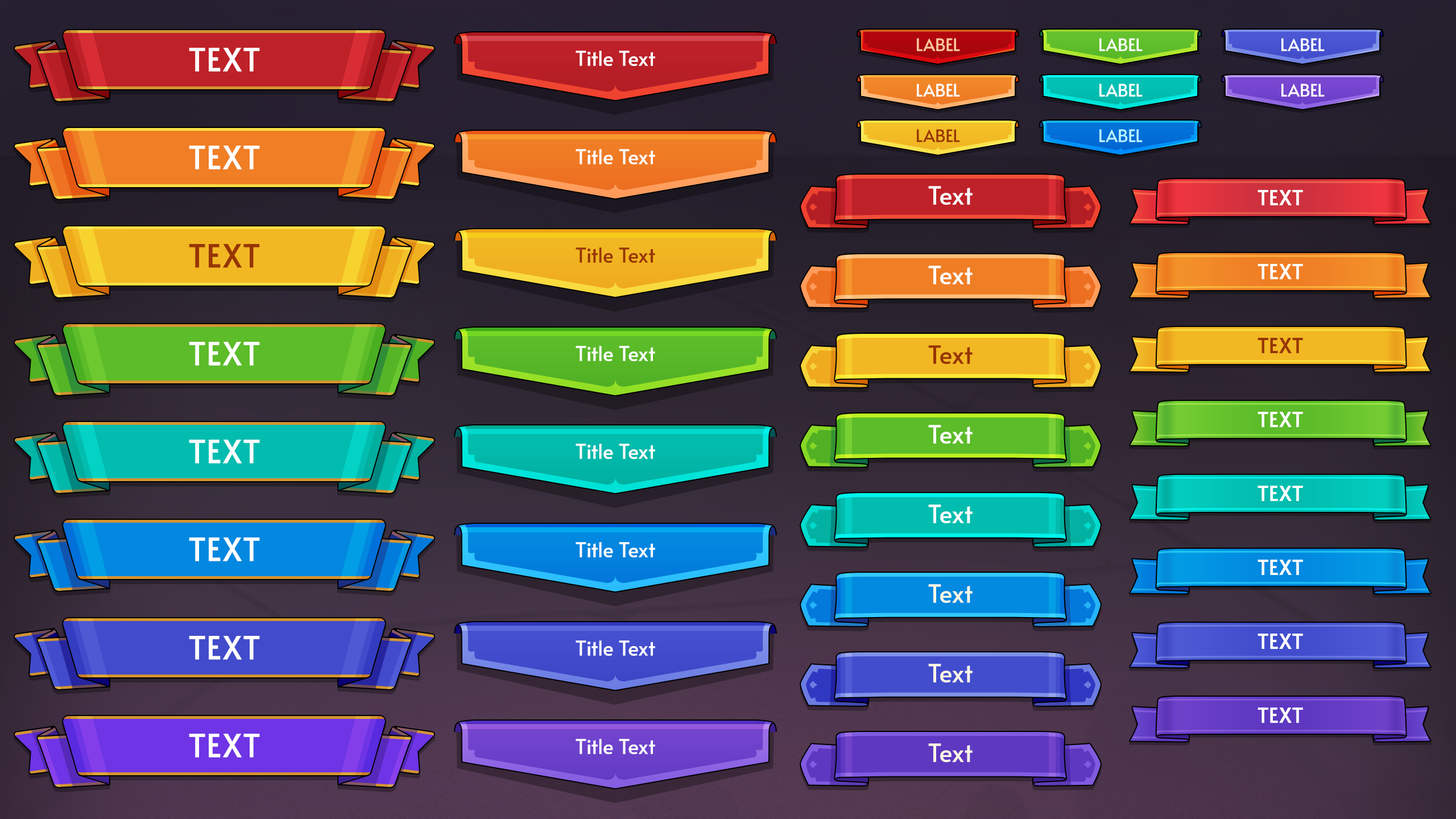
<style>
.page{position:relative;width:1456px;height:819px}
.page>*{position:absolute;margin:0}
.t1{font:17.1px "Alata-Regular";color:#ffc69c;text-transform:uppercase}
.t2{font:17.1px "Alata-Regular";color:#ffffff;text-transform:uppercase}
.t3{font:31.8px "Alata-Regular";color:#ffffff;text-transform:uppercase;font-weight:bold}
.t4{font:20.5px "Alata-Regular";color:#ffffff}
.t5{font:17.1px "Alata-Regular";color:#973504;text-transform:uppercase}
.t6{font:17.1px "Alata-Regular";color:#b6f5ff;text-transform:uppercase}
.t7{font:25px "Alata-Regular";color:#ffffff}
.t8{font:20.5px "Alata-Regular";color:#ffffff;text-transform:uppercase;font-weight:bold}
.t9{font:31.8px "Alata-Regular";color:#973504;text-transform:uppercase;font-weight:bold}
.t10{font:20.5px "Alata-Regular";color:#973504}
.t11{font:20.5px "Alata-Regular";color:#973504;text-transform:uppercase;font-weight:bold}
.t12{font:25px "Alata-Regular";color:#973504}
.t13{font:25px "Alata-Regular";color:#fff8e6}
</style>
<div class="page">
<p class="t1" style="left:917px;top:38px;width:43px;height:13px">Label</p>
<p class="t2" style="left:1099px;top:38px;width:44px;height:13px">Label</p>
<p class="t2" style="left:1281px;top:38px;width:44px;height:13px">Label</p>
<p class="t3" style="left:189px;top:48px;width:71px;height:24px">Text</p>
<p class="t4" style="left:576px;top:51px;width:79px;height:15px">Title Text</p>
<p class="t2" style="left:917px;top:84px;width:43px;height:13px">Label</p>
<p class="t2" style="left:1099px;top:84px;width:44px;height:13px">Label</p>
<p class="t2" style="left:1281px;top:84px;width:44px;height:13px">Label</p>
<p class="t5" style="left:917px;top:129px;width:43px;height:13px">Label</p>
<p class="t6" style="left:1099px;top:129px;width:44px;height:13px">Label</p>
<p class="t3" style="left:189px;top:146px;width:71px;height:23px">Text</p>
<p class="t4" style="left:576px;top:149px;width:79px;height:15px">Title Text</p>
<p class="t7" style="left:928px;top:186px;width:45px;height:19px">Text</p>
<p class="t8" style="left:1257px;top:190px;width:46px;height:15px">Text</p>
<p class="t9" style="left:189px;top:244px;width:71px;height:24px">Text</p>
<p class="t10" style="left:576px;top:247px;width:79px;height:16px">Title Text</p>
<p class="t7" style="left:928px;top:266px;width:45px;height:18px">Text</p>
<p class="t8" style="left:1257px;top:264px;width:46px;height:15px">Text</p>
<p class="t3" style="left:189px;top:342px;width:71px;height:24px">Text</p>
<p class="t11" style="left:1257px;top:338px;width:46px;height:15px">Text</p>
<p class="t4" style="left:576px;top:346px;width:79px;height:15px">Title Text</p>
<p class="t12" style="left:928px;top:345px;width:45px;height:19px">Text</p>
<p class="t8" style="left:1257px;top:412px;width:46px;height:15px">Text</p>
<p class="t7" style="left:928px;top:425px;width:45px;height:19px">Text</p>
<p class="t3" style="left:189px;top:440px;width:71px;height:24px">Text</p>
<p class="t4" style="left:576px;top:444px;width:79px;height:15px">Title Text</p>
<p class="t8" style="left:1257px;top:486px;width:46px;height:15px">Text</p>
<p class="t7" style="left:928px;top:504px;width:45px;height:19px">Text</p>
<p class="t3" style="left:189px;top:537px;width:71px;height:24px">Text</p>
<p class="t4" style="left:576px;top:542px;width:79px;height:15px">Title Text</p>
<p class="t8" style="left:1257px;top:560px;width:46px;height:15px">Text</p>
<p class="t13" style="left:928px;top:584px;width:45px;height:19px">Text</p>
<p class="t3" style="left:189px;top:636px;width:71px;height:24px">Text</p>
<p class="t4" style="left:576px;top:640px;width:79px;height:16px">Title Text</p>
<p class="t8" style="left:1257px;top:634px;width:46px;height:15px">Text</p>
<p class="t13" style="left:928px;top:664px;width:45px;height:18px">Text</p>
<p class="t8" style="left:1257px;top:708px;width:46px;height:15px">Text</p>
<p class="t3" style="left:189px;top:734px;width:71px;height:24px">Text</p>
<p class="t4" style="left:576px;top:739px;width:79px;height:15px">Title Text</p>
<p class="t13" style="left:928px;top:743px;width:45px;height:19px">Text</p>
</div>
